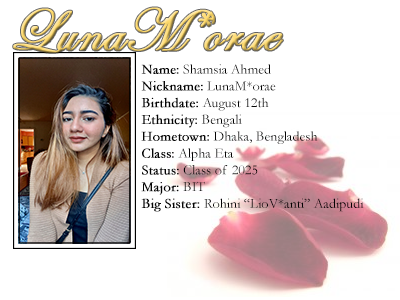
<style>
.page{position:relative;width:400px;height:300px;background:#ffffff}
.page>*{position:absolute;margin:0}
.t1{font:60px "EdwardianScriptITC";font-weight:bold}
.t2{font:14px "Garamond";color:#000000}
.t3{font:14px "Garamond";color:#000000;font-weight:bold}
</style>
<div class="page">
<p class="t1" style="left:13px;top:7px;width:270px;height:46px">LunaM*orae</p>
<p class="t2" style="left:141px;top:64px;width:223px;height:148px"><span class="t3">Name:</span> Shamsia Ahmed<br><span class="t3">Nickname:</span> LunaM*orae<br><span class="t3">Birthdate:</span> August 12th<br><span class="t3">Ethnicity:</span> Bengali<br><span class="t3">Hometown:</span> Dhaka, Bengladesh<br><span class="t3">Class:</span> Alpha Eta<br><span class="t3">Status:</span> Class of 2025<br><span class="t3">Major:</span> BIT<br><span class="t3">Big Sister: </span>Rohini “LioV*anti” Aadipudi</p>
</div>
